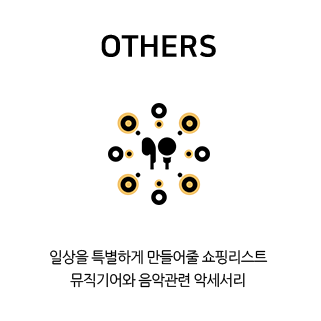
<style>
.page{position:relative;width:321px;height:321px;background:#ffffff}
.page>*{position:absolute;margin:0}
.t1{font:30px "NanumSquareEB";color:#000000}
.t2{font:15px/23px "NanumGothic";letter-spacing:-0.05em;color:#000000}
</style>
<div class="page">
<p class="t1" style="left:101px;top:34px;width:115px;height:23px">OTHERS</p>
<p class="t2" style="left:50px;top:249px;width:218px;height:39px;text-align:center">일상을 특별하게 만들어줄 쇼핑리스트<br>뮤직기어와 음악관련 악세서리</p>
</div>
